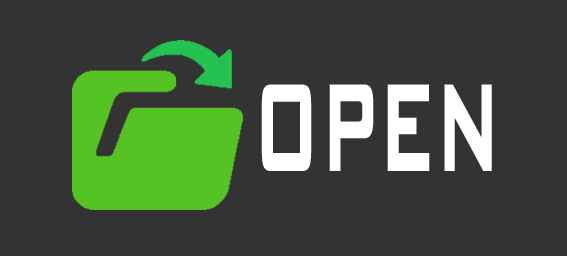
<style>
.page{position:relative;width:567px;height:256px;background:#333333}
.page>*{position:absolute;margin:0}
.t1{font:163.5px "BankGothicBold";color:#ffffff;font-weight:bold;scale:0.45 1}
</style>
<div class="page">
<p class="t1" style="left:261px;top:84px;width:231px;height:87px">OPEN</p>
</div>
